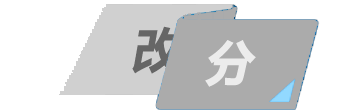
<style>
.page{position:relative;width:350px;height:110px;background:#ffffff}
.page>*{position:absolute;margin:0}
.t1{font:48px "MicrosoftYaHei-Bold";color:#666666;text-transform:uppercase;font-style:italic}
.t2{font:48px "MicrosoftYaHei-Bold";color:#ececec;text-transform:uppercase;font-style:italic}
</style>
<div class="page">
<p class="t1" style="left:132px;top:26px;width:52px;height:48px">改</p>
<p class="t2" style="left:205px;top:40px;width:51px;height:47px">分</p>
</div>
